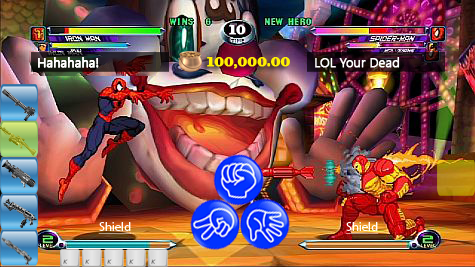
<style>
.page{position:relative;width:475px;height:267px}
.page>*{position:absolute;margin:0}
.t1{font:12.5px "Elephant-Regular";color:#ffffff;font-weight:bold}
.t2{font:12.5px "NirmalaUI";color:#ffffff;font-weight:bold}
.t3{font:12.5px "Elephant-Regular";color:#fff000;font-weight:bold}
.t4{font:12.5px "MyriadPro-Regular";color:#ffffff;text-decoration:underline}
</style>
<div class="page">
<p class="t1" style="left:229px;top:25px;width:17px;height:10px">10</p>
<p class="t2" style="left:38px;top:57px;width:61px;height:11px">Hahahaha!</p>
<p class="t2" style="left:38px;top:57px;width:61px;height:11px">Hahahaha!</p>
<p class="t3" style="left:207px;top:57px;width:83px;height:12px">100,000.00</p>
<p class="t2" style="left:315px;top:57px;width:85px;height:11px">LOL Your Dead</p>
<p class="t4" style="left:98px;top:222px;width:34px;height:12px">Shield</p>
<p class="t4" style="left:345px;top:222px;width:34px;height:12px">Shield</p>
</div>
